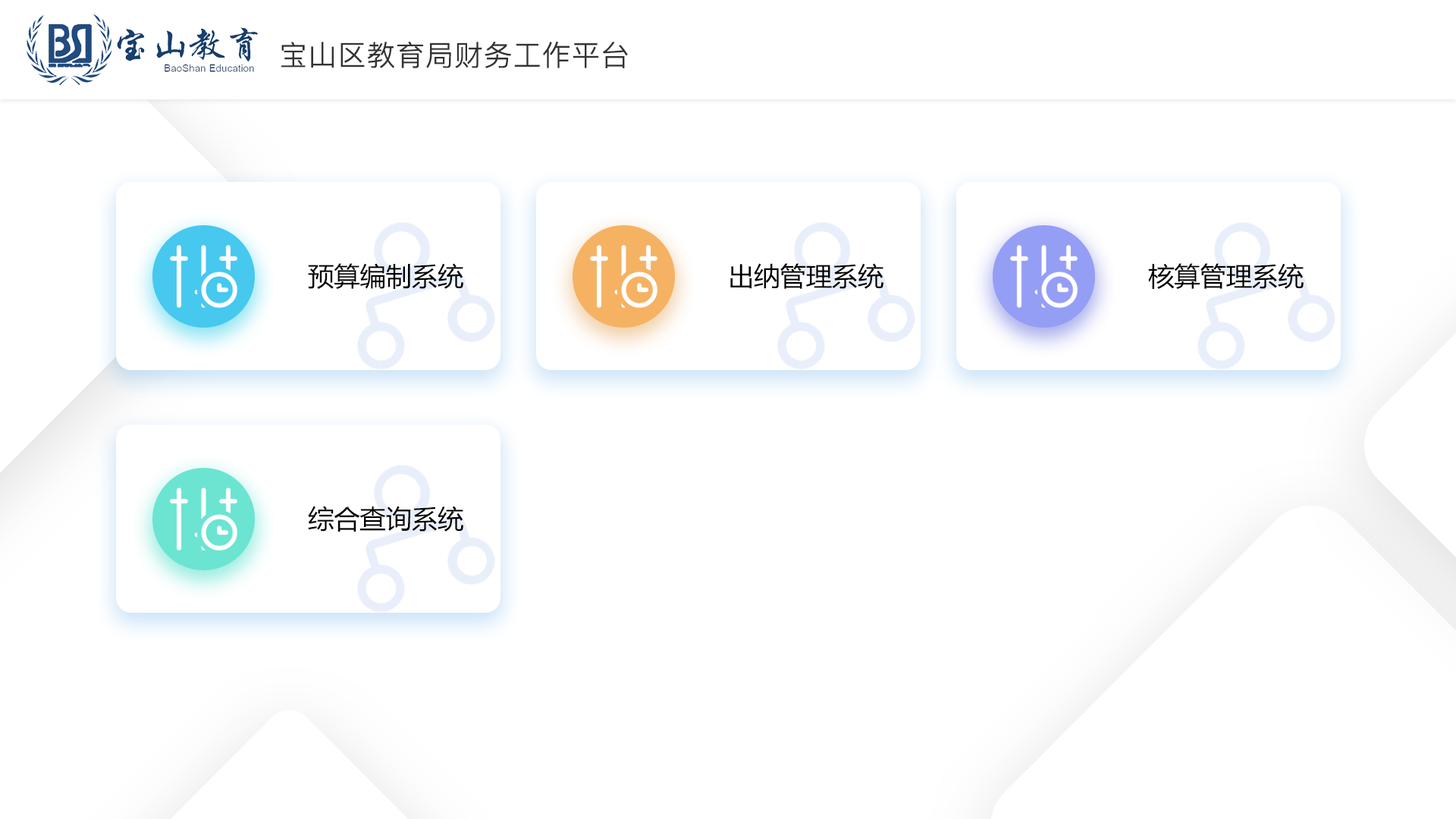
<style>
.page{position:relative;width:1456px;height:819px;background:#ffffff}
.page>*{position:absolute;margin:0}
.t1{font:28.5px "PingFangSC-Light";color:#333333;font-weight:bold}
.t2{font:26px "MicrosoftYaHei";color:#000000}
</style>
<div class="page">
<p class="t1" style="left:281px;top:41px;width:347px;height:27px">宝山区教育局财务工作平台</p>
<p class="t2" style="left:308px;top:263px;width:155px;height:26px">预算编制系统</p>
<p class="t2" style="left:730px;top:263px;width:153px;height:26px">出纳管理系统</p>
<p class="t2" style="left:1148px;top:263px;width:156px;height:26px">核算管理系统</p>
<p class="t2" style="left:308px;top:506px;width:155px;height:26px">综合查询系统</p>
</div>
